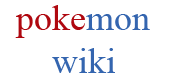
<style>
.page{position:relative;width:178px;height:84px;background:#ffffff}
.page>*{position:absolute;margin:0}
.t1{font:36px "TimesNewRomanPSMT";color:#3465af}
.t2{font:36px "TimesNewRomanPSMT";color:#af0810}
</style>
<div class="page">
<p class="t1" style="left:15px;top:5px;width:135px;height:68px"><span class="t2">poke</span>mon<br> wiki</p>
</div>
